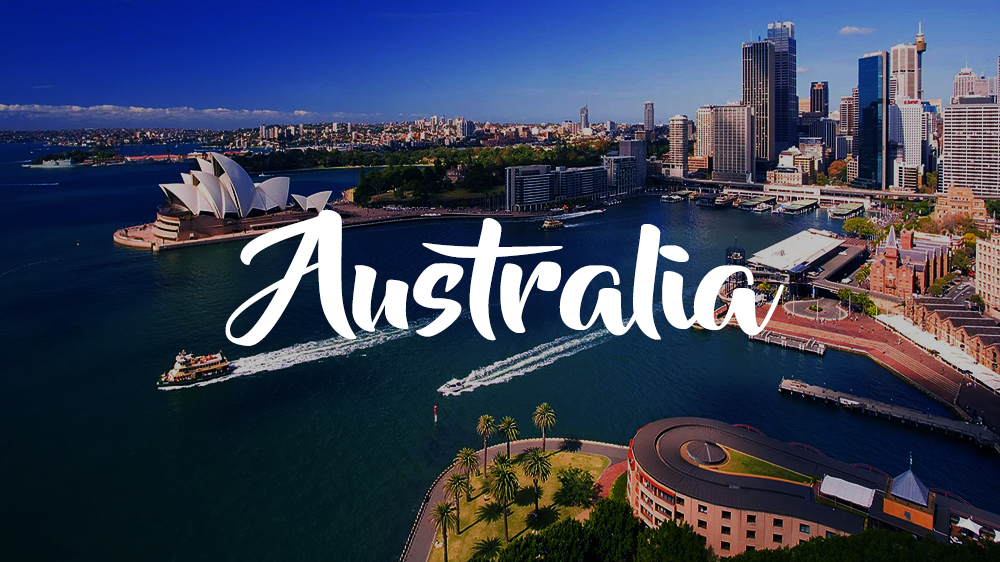
<style>
.page{position:relative;width:1000px;height:562px}
.page>*{position:absolute;margin:0}
.t1{font:120px "BeyondTheMountains";letter-spacing:-0.02em;color:#ffffff;scale:1.25 1}
</style>
<div class="page">
<p class="t1" style="left:225px;top:209px;width:559px;height:137px">Australia</p>
</div>
